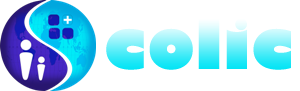
<style>
.page{position:relative;width:300px;height:91px;background:#ffffff}
.page>*{position:absolute;margin:0}
.t1{font:66.7px "GillSans-UltraBold"}
</style>
<div class="page">
<p class="t1" style="left:106px;top:18px;width:185px;height:52px">colic</p>
</div>
